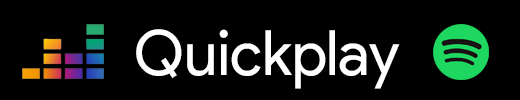
<style>
.page{position:relative;width:520px;height:100px;background:#000000}
.page>*{position:absolute;margin:0}
.t1{font:62.5px "ProductSans-Regular";color:#ffffff}
</style>
<div class="page">
<p class="t1" style="left:136px;top:29px;width:264px;height:60px">Quickplay</p>
</div>
